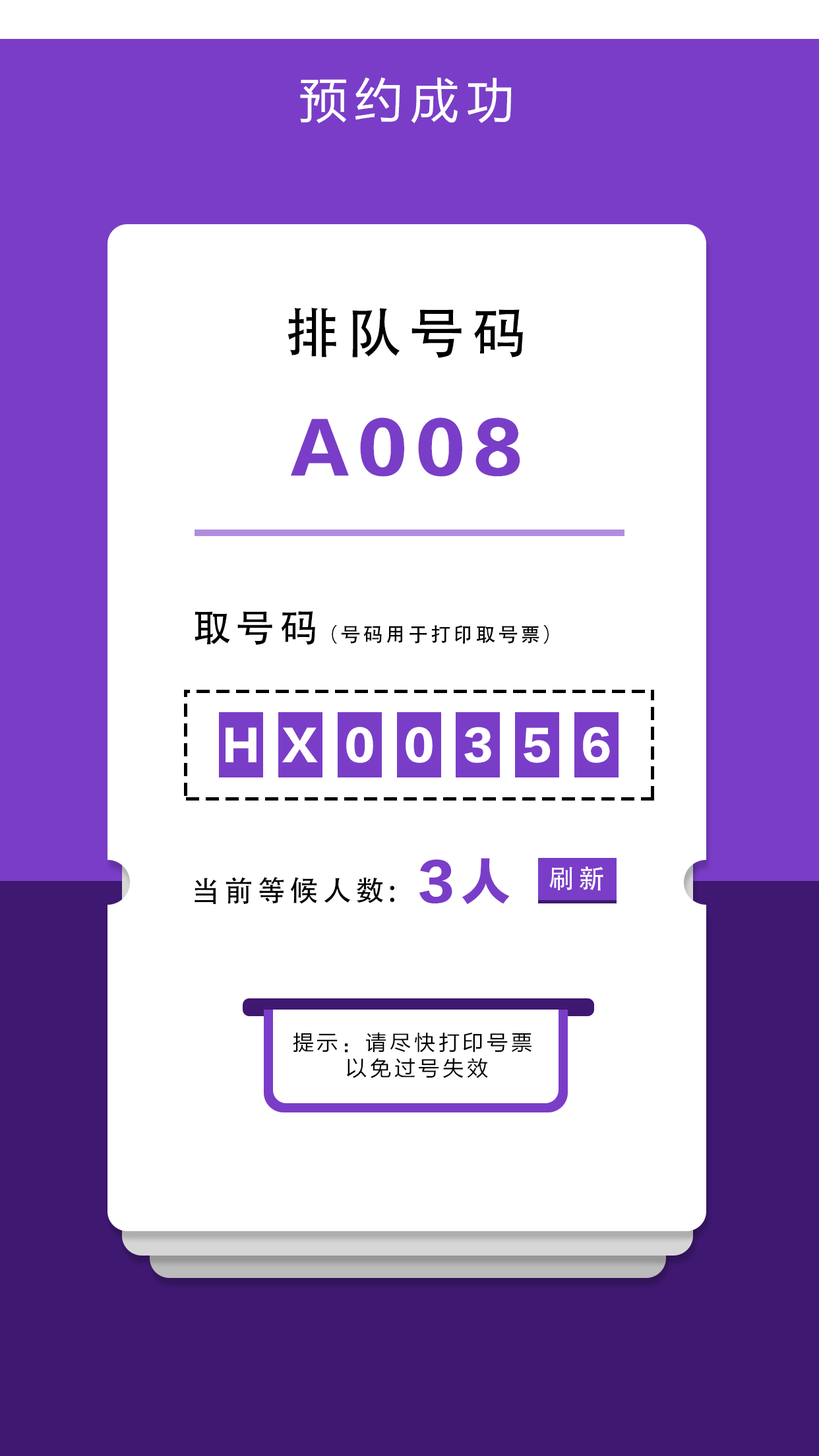
<style>
.page{position:relative;width:819px;height:1456px;background:#ffffff}
.page>*{position:absolute;margin:0}
.t1{font:49px "FZLTHJW--GB1-0";letter-spacing:0.14em;color:#ffffff}
.t2{font:54.7px "AdobeHeitiStd-Regular";letter-spacing:0.14em;color:#000000}
.t3{font:65.9px "FZLTTHK--GBK1-0";letter-spacing:0.14em;color:#7a3dc8}
.t4{font:38.2px "AdobeHeitiStd-Regular";letter-spacing:0.14em;color:#000000}
.t5{font:19.7px "AdobeHeitiStd-Regular";letter-spacing:0.14em;color:#000000}
.t6{font:40.2px "FZLTTHK--GBK1-0";letter-spacing:0.14em;color:#ffffff}
.t7{font:49.7px "FZLTTHK--GBK1-0";letter-spacing:0.14em;color:#7a3dc8}
.t8{font:26.3px "AdobeHeitiStd-Regular";letter-spacing:0.14em;color:#ffffff}
.t9{font:28.8px "AdobeHeitiStd-Regular";letter-spacing:0.14em;color:#000000}
.t10{font:21.3px/25.5px "FZLTHJW--GB1-0";letter-spacing:0.14em;color:#000000}
</style>
<div class="page">
<p class="t1" style="left:300px;top:77px;width:212px;height:46px">预约成功</p>
<p class="t2" style="left:288px;top:307px;width:235px;height:51px">排队号码</p>
<p class="t3" style="left:291px;top:417px;width:229px;height:60px">A008</p>
<p class="t4" style="left:195px;top:611px;width:120px;height:34px">取号码</p>
<p class="t5" style="left:332px;top:625px;width:217px;height:19px">（号码用于打印取号票）</p>
<p class="t6" style="left:226px;top:727px;width:31px;height:35px">H</p>
<p class="t6" style="left:282px;top:727px;width:36px;height:35px">X</p>
<p class="t6" style="left:346px;top:727px;width:27px;height:36px">0</p>
<p class="t6" style="left:406px;top:727px;width:27px;height:36px">0</p>
<p class="t6" style="left:464px;top:727px;width:27px;height:36px">3</p>
<p class="t6" style="left:524px;top:727px;width:27px;height:36px">5</p>
<p class="t6" style="left:583px;top:727px;width:27px;height:36px">6</p>
<p class="t7" style="left:419px;top:858px;width:91px;height:47px">3人</p>
<p class="t8" style="left:549px;top:866px;width:54px;height:25px">刷新</p>
<p class="t9" style="left:195px;top:876px;width:199px;height:28px">当前等候人数:</p>
<p class="t10" style="left:293px;top:1032px;width:238px;height:46px;text-align:center">提示：请尽快打印号票 <br>以免过号失效</p>
</div>
